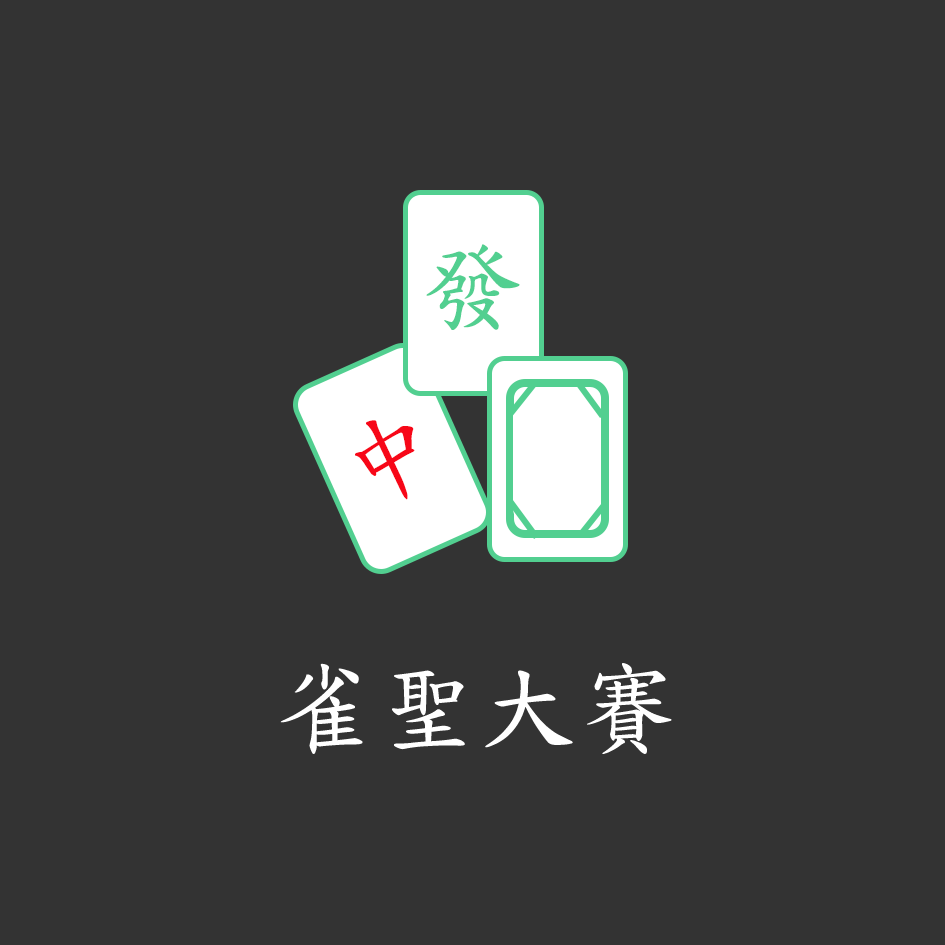
<style>
.page{position:relative;width:945px;height:945px;background:#333333}
.page>*{position:absolute;margin:0}
.t1{font:100px "DFKaiShu-SB-Estd-BF";color:#ffffff}
</style>
<div class="page">
<p class="t1" style="left:280px;top:663px;width:392px;height:91px">雀聖大賽</p>
</div>
